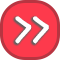
<style>
.page{position:relative;width:60px;height:60px;background:#fd3a4c}
.page>*{position:absolute;margin:0}
.t1{font:29.2px "Denne-Delica";color:#ffffff;font-weight:bold;font-style:italic}
</style>
<div class="page">
<p class="t1" style="left:15px;top:16px;width:34px;height:28px">&gt;&gt;</p>
</div>
